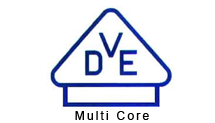
<style>
.page{position:relative;width:215px;height:123px;background:#ffffff}
.page>*{position:absolute;margin:0}
.t1{font:12px "ArialMT";letter-spacing:0.2em;color:#000000}
</style>
<div class="page">
<p class="t1" style="left:75px;top:111px;width:74px;height:9px">Multi Core</p>
</div>
